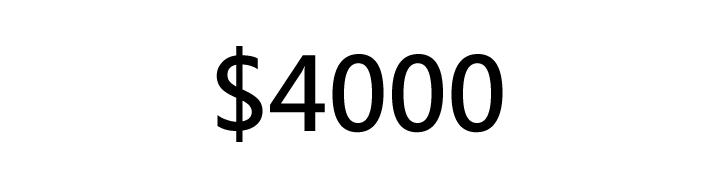
<style>
.page{position:relative;width:709px;height:189px;background:#ffffff}
.page>*{position:absolute;margin:0}
.t1{font:100px "MicrosoftJhengHeiBold";color:#000000}
</style>
<div class="page">
<p class="t1" style="left:216px;top:46px;width:287px;height:96px">$4000</p>
</div>
